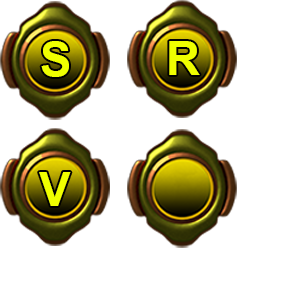
<style>
.page{position:relative;width:300px;height:300px;background:#ffffff}
.page>*{position:absolute;margin:0}
.t1{font:47.2px "Arial-BoldMT";color:#f0ff00}
</style>
<div class="page">
<p class="t1" style="left:41px;top:41px;width:28px;height:36px">S</p>
<p class="t1" style="left:169px;top:41px;width:31px;height:34px">R</p>
<p class="t1" style="left:39px;top:172px;width:32px;height:34px">V</p>
</div>
